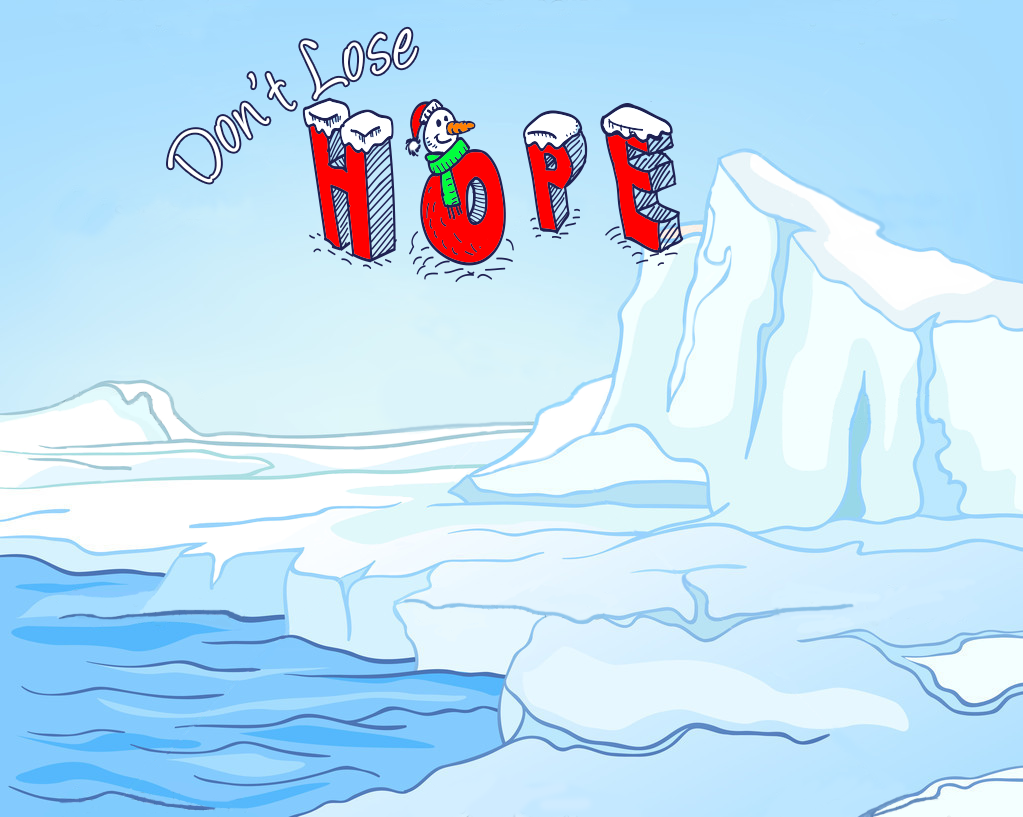
<style>
.page{position:relative;width:1023px;height:817px}
.page>*{position:absolute;margin:0}
.t1{font:93.3px "Angelina";color:#ffffff;scale:0.71 1}
</style>
<div class="page">
<p class="t1" style="left:168px;top:28px;width:250px;height:155px;rotate:-30deg">Don’t Lose</p>
</div>
